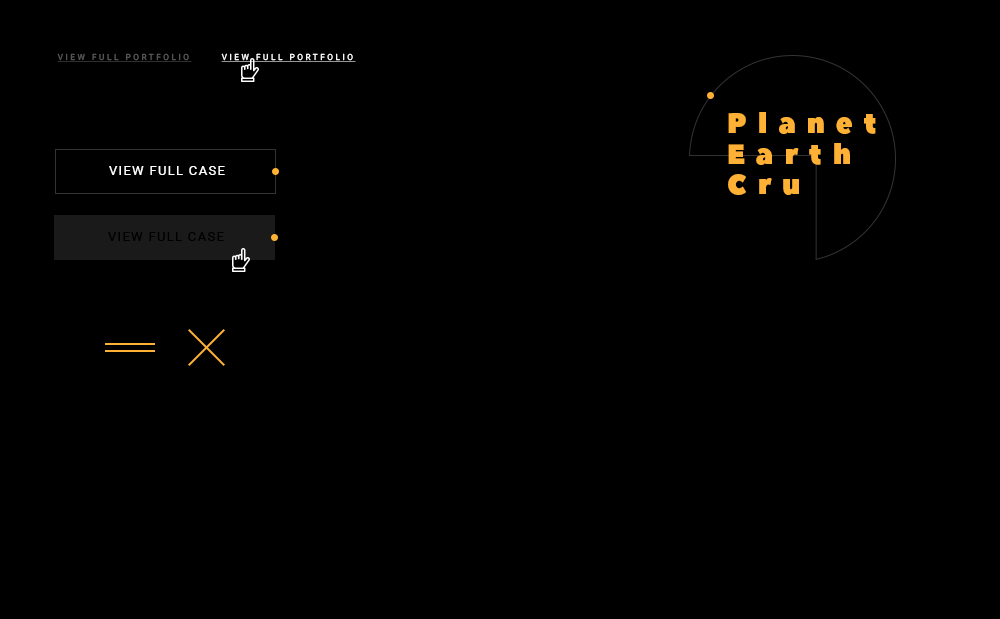
<style>
.page{position:relative;width:1000px;height:619px;background:#000000}
.page>*{position:absolute;margin:0}
.t1{font:8.3px "Roboto-Regular";letter-spacing:0.3em;text-decoration:underline}
.t2{font:8.3px "Roboto-Regular";letter-spacing:0.3em;color:#ffffff;text-decoration:underline}
.t3{font:27.7px/30.3px "PeaceSans";letter-spacing:0.4em;color:#ffb135}
.t4{font:13px "Roboto-Regular";letter-spacing:0.1em;color:#ffffff;text-transform:uppercase}
.t5{font:13px "Roboto-Regular";letter-spacing:0.1em;color:#000000;text-transform:uppercase}
</style>
<div class="page">
<p class="t1" style="left:57px;top:53px;width:135px;height:9px">VIEW FULL PORTFOLIO</p>
<p class="t2" style="left:221px;top:53px;width:135px;height:9px">VIEW FULL PORTFOLIO</p>
<p class="t3" style="left:728px;top:112px;width:148px;height:83px">Planet<br>Earth<br>Cru</p>
<p class="t4" style="left:109px;top:166px;width:116px;height:9px">view full case</p>
<p class="t5" style="left:108px;top:232px;width:116px;height:9px">view full case</p>
</div>
